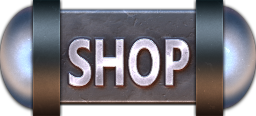
<style>
.page{position:relative;width:256px;height:116px}
.page>*{position:absolute;margin:0}
.t1{font:64.6px "SegoeUI-Bold";scale:0.71 1}
</style>
<div class="page">
<p class="t1" style="left:69px;top:39px;width:120px;height:47px">SHOP</p>
<p class="t1" style="left:69px;top:39px;width:120px;height:47px">SHOP</p>
</div>
